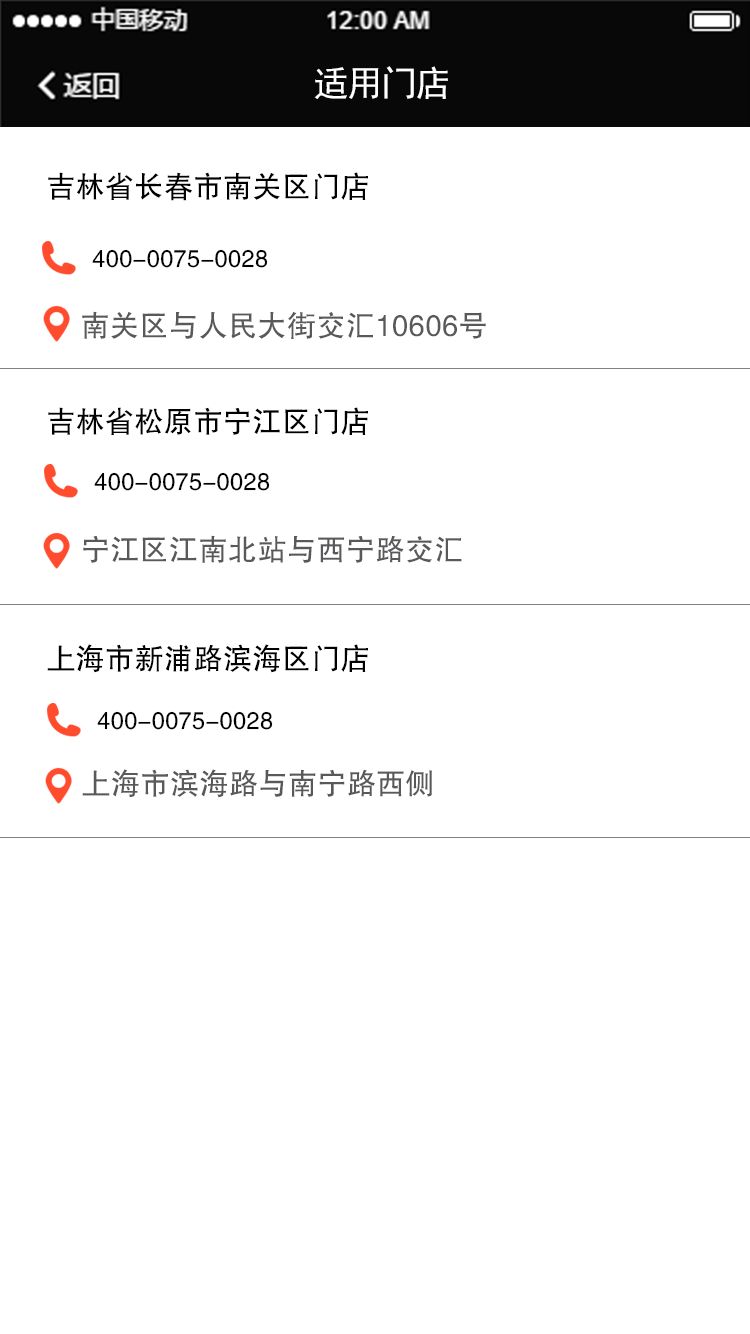
<style>
.page{position:relative;width:750px;height:1334px;background:#ffffff}
.page>*{position:absolute;margin:0}
.t1{font:36px "SimHei";letter-spacing:-0.06em;color:#ffffff}
.t2{font:30px "FZHTK--GBK1-0";letter-spacing:0.02em;color:#000001;scale:0.96 1}
.t3{font:24.3px "FZHTK--GBK1-0";letter-spacing:0.02em;color:#000001;scale:0.96 1}
.t4{font:30px "FZHTK--GBK1-0";letter-spacing:0.02em;color:#59595c;scale:0.96 1}
</style>
<div class="page">
<p class="t1" style="left:314px;top:66px;width:134px;height:33px">适用门店</p>
<p class="t2" style="left:48px;top:172px;width:320px;height:29px">吉林省长春市南关区门店</p>
<p class="t3" style="left:92px;top:249px;width:176px;height:19px">400-0075-0028</p>
<p class="t4" style="left:82px;top:311px;width:404px;height:28px">南关区与人民大街交汇10606号</p>
<p class="t2" style="left:48px;top:407px;width:320px;height:28px">吉林省松原市宁江区门店</p>
<p class="t3" style="left:94px;top:472px;width:176px;height:19px">400-0075-0028</p>
<p class="t4" style="left:83px;top:535px;width:379px;height:28px">宁江区江南北站与西宁路交汇</p>
<p class="t2" style="left:47px;top:644px;width:321px;height:29px">上海市新浦路滨海区门店</p>
<p class="t3" style="left:97px;top:711px;width:176px;height:19px">400-0075-0028</p>
<p class="t4" style="left:82px;top:769px;width:351px;height:29px">上海市滨海路与南宁路西侧</p>
</div>
